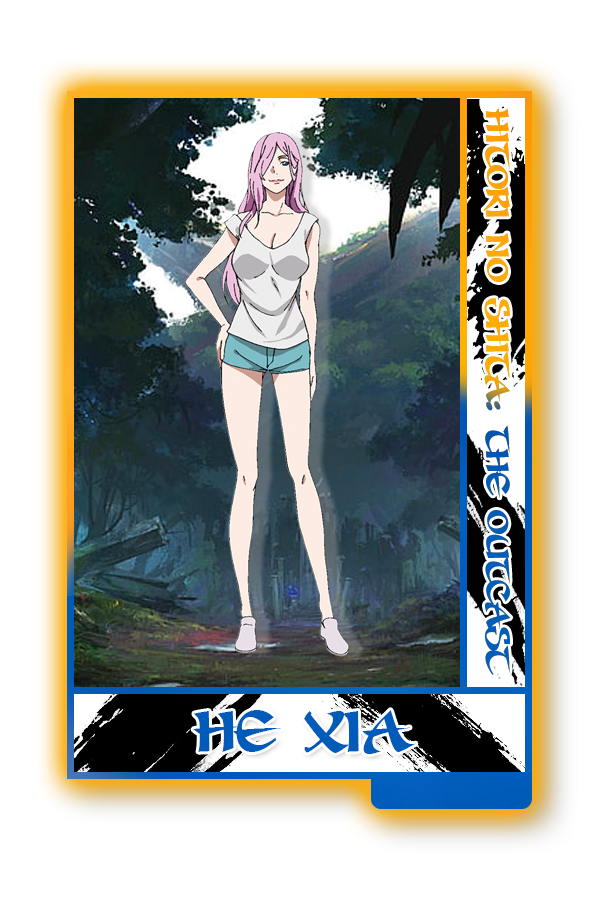
<style>
.page{position:relative;width:600px;height:900px;background:#ffffff}
.page>*{position:absolute;margin:0}
.t1{font:36.7px "SevenSwordsmenBB"}
.t2{font:64.5px "SevenSwordsmenBB";color:#005bb9}
</style>
<div class="page">
<p class="t1" style="left:483px;top:108px;width:28px;height:567px;rotate:90deg">HITORI NO SHITA: THE OUTCAST</p>
<p class="t2" style="left:193px;top:710px;width:223px;height:44px">HE XIA</p>
</div>
